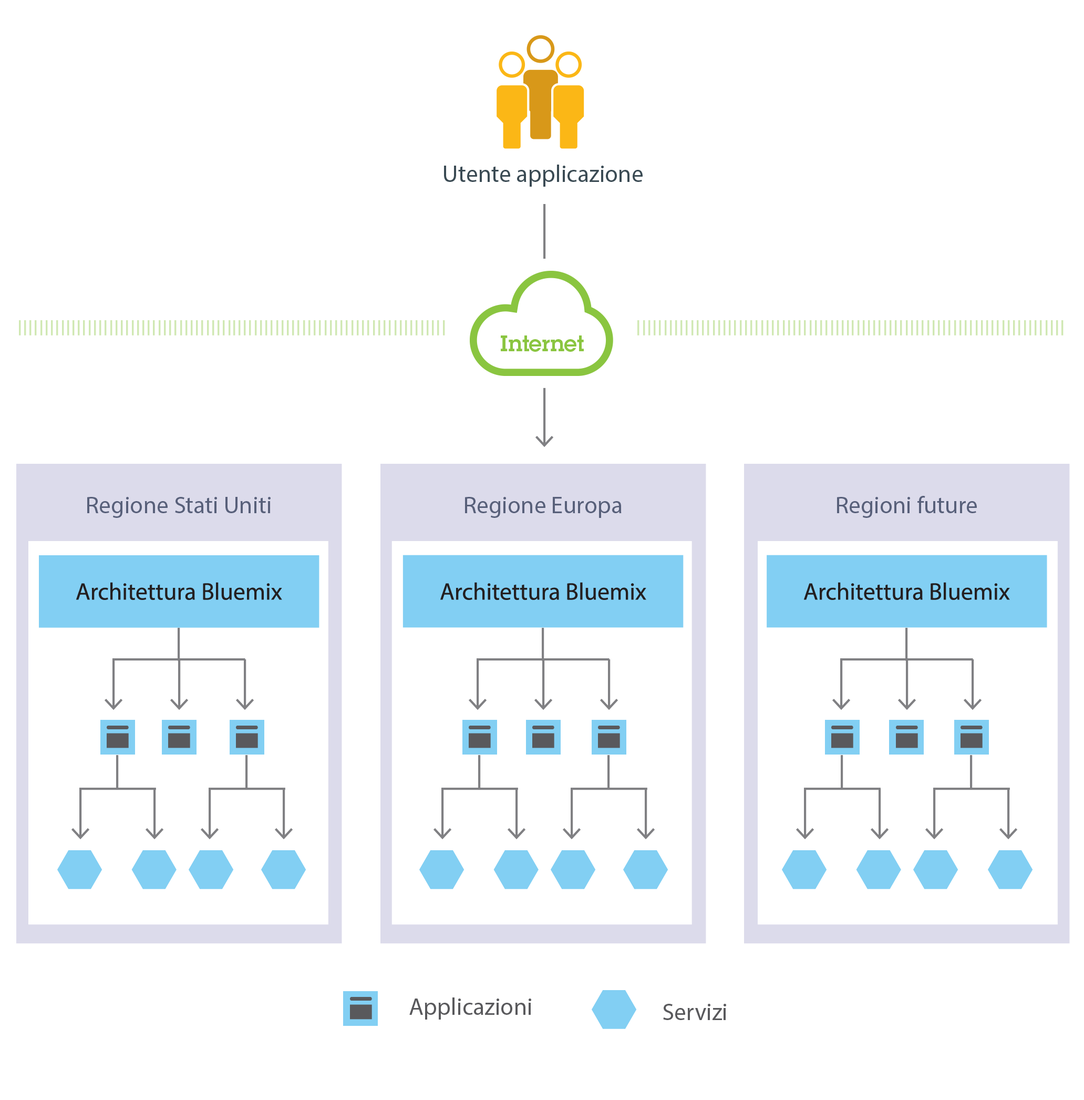
<style>
.page{position:relative;width:1084px;height:1100px;background:#ffffff}
.page>*{position:absolute;margin:0}
.t1{font:24.1px "MyriadPro-Regular";color:#3b4b54}
.t2{font:21.9px "LubalinDemiforIBM";color:#8ac540}
.t3{font:24.1px "MyriadPro-Regular";color:#58607a}
.t4{font:24.1px "MyriadPro-Regular";color:#231f20}
.t5{font:24.1px "MyriadPro-Regular";color:#59595c}
</style>
<div class="page">
<p class="t1" style="left:444px;top:165px;width:199px;height:22px">Utente applicazione</p>
<p class="t2" style="left:501px;top:335px;width:83px;height:17px">Internet</p>
<p class="t3" style="left:87px;top:497px;width:184px;height:21px">Regione Stati Uniti Sud</p>
<p class="t3" style="left:465px;top:497px;width:157px;height:21px">Regione Europa Regno Unito</p>
<p class="t3" style="left:837px;top:496px;width:140px;height:22px">Regioni future</p>
<p class="t4" style="left:76px;top:582px;width:206px;height:18px">Architettura Bluemix</p>
<p class="t4" style="left:440px;top:582px;width:207px;height:18px">Architettura Bluemix</p>
<p class="t4" style="left:804px;top:582px;width:206px;height:18px">Architettura Bluemix</p>
<p class="t5" style="left:409px;top:997px;width:122px;height:22px">Applicazioni</p>
<p class="t5" style="left:663px;top:1003px;width:63px;height:17px">Servizi</p>
</div>
